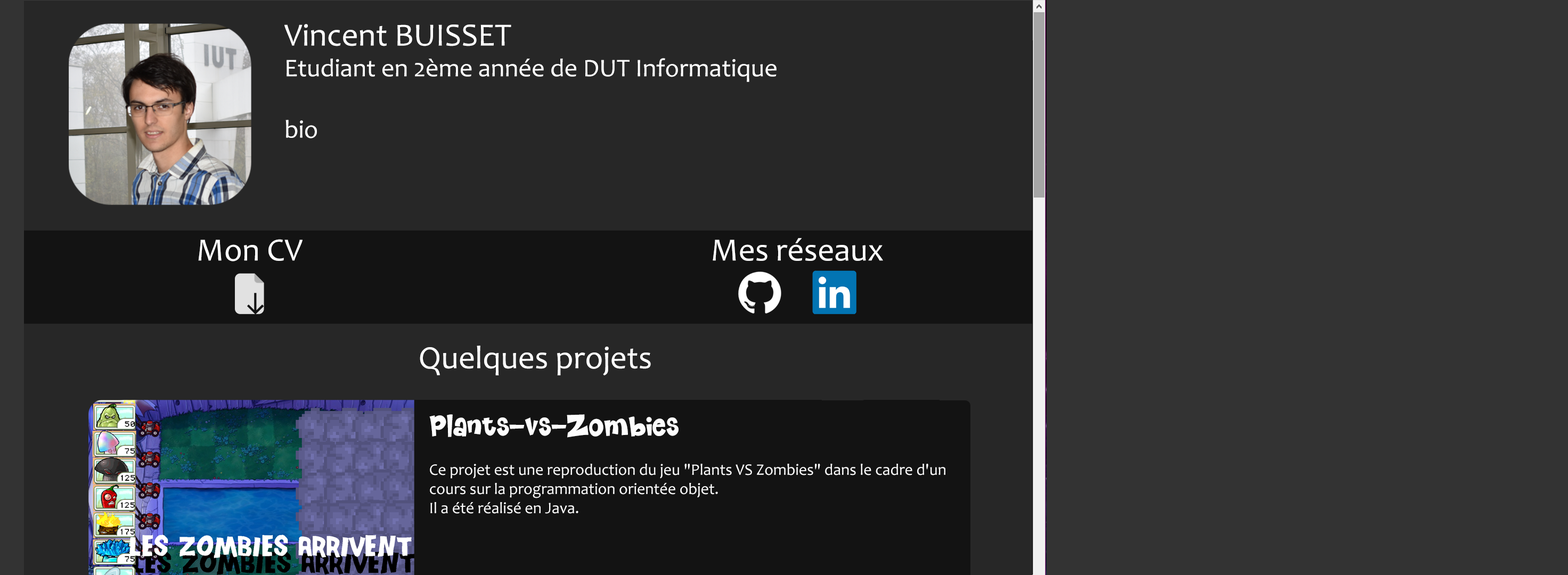
<style>
.page{position:relative;width:1568px;height:575px;background:#333333}
.page>*{position:absolute;margin:0}
.t1{font:25.6px "Candara";color:#ffffff}
.t2{font:32.5px "Candara";color:#ffffff}
.t3{font:26.6px "Riangriung-Demo";color:#fdfdfd}
.t4{font:16px "Candara";color:#fdfdfd}
</style>
<div class="page">
<p class="t1" style="left:284px;top:24px;width:493px;height:114px"><span class="t2">Vincent BUISSET<br></span>Etudiant en 2ème année de DUT Informatique<br><br>bio</p>
<p class="t2" style="left:198px;top:239px;width:105px;height:23px">Mon CV</p>
<p class="t2" style="left:713px;top:238px;width:170px;height:23px">Mes réseaux</p>
<p class="t2" style="left:420px;top:346px;width:231px;height:29px">Quelques projets</p>
<p class="t3" style="left:429px;top:414px;width:250px;height:24px">Plants-vs-Zombies</p>
<p class="t4" style="left:430px;top:464px;width:515px;height:50px">Ce projet est une reproduction du jeu "Plants VS Zombies" dans le cadre d'un cours sur la programmation orientée objet.<br>Il a été réalisé en Java.</p>
</div>
